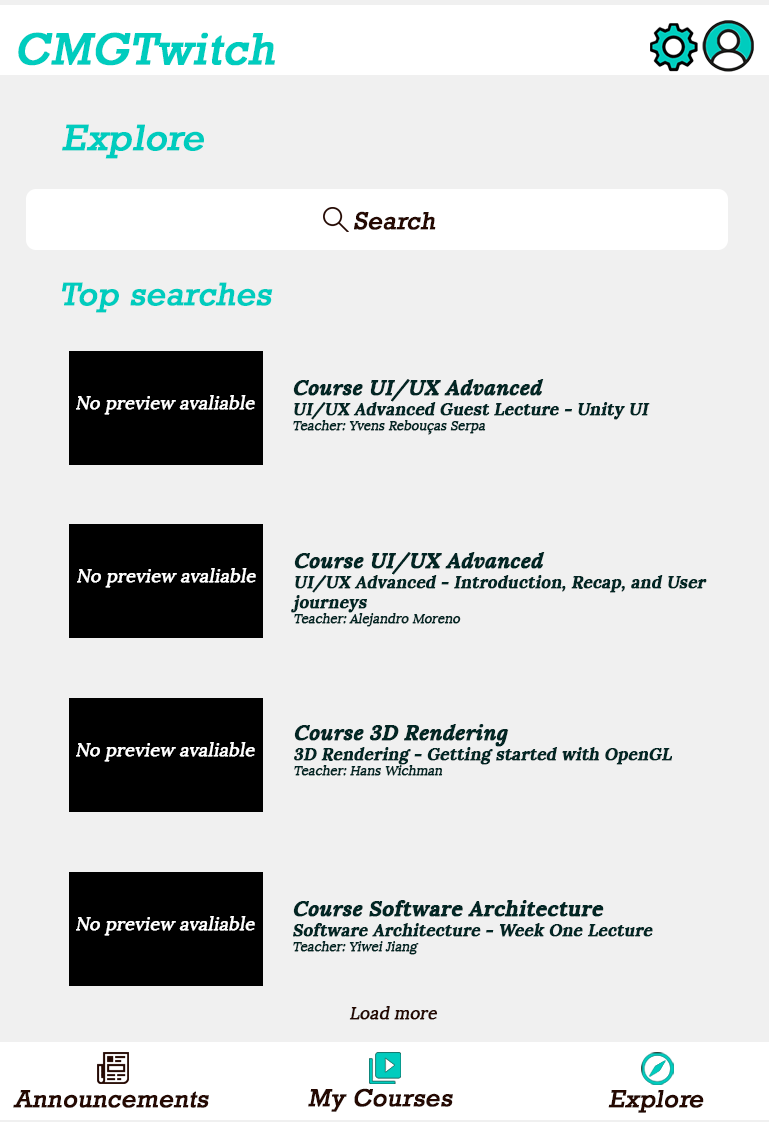
<style>
.page{position:relative;width:769px;height:1122px;background:#f0f0f0}
.page>*{position:absolute;margin:0}
.t1{font:45.4px "Rockwell";color:#00ccbe;font-weight:bold;font-style:italic}
.t2{font:37.5px "Rockwell";color:#00ccbe;font-weight:bold;font-style:italic}
.t3{font:25px "Rockwell";color:#250902;font-weight:bold;font-style:italic}
.t4{font:33.3px "Rockwell";color:#00ccbe;font-weight:bold;font-style:italic}
.t5{font:16.7px "Lora-Bold";color:#022624;font-weight:bold;font-style:italic}
.t6{font:20.8px "Lora-BoldItalic";color:#022624;font-weight:bold;font-style:italic}
.t7{font:12.5px "Lora-Regular";color:#022624;font-weight:bold;font-style:italic}
.t8{font:17.7px "Lora-Regular";color:#ffffff;font-weight:bold;font-style:italic}
.t9{font:20.8px "Lora-Bold";color:#022624;font-weight:bold;font-style:italic}
.t10{font:16.7px "Lora-Regular";color:#250902;font-weight:bold;font-style:italic}
</style>
<div class="page">
<p class="t1" style="left:18px;top:32px;width:257px;height:34px">CMGTwitch</p>
<p class="t2" style="left:62px;top:124px;width:142px;height:35px">Explore</p>
<p class="t3" style="left:354px;top:211px;width:82px;height:19px">Search</p>
<p class="t4" style="left:62px;top:282px;width:211px;height:31px">Top searches</p>
<p class="t5" style="left:293px;top:379px;width:357px;height:56px"><span class="t6">Course UI/UX Advanced<br></span>UI/UX Advanced Guest Lecture - Unity UI<br><span class="t7">Teacher: Yvens Rebouças Serpa</span></p>
<p class="t8" style="left:76px;top:395px;width:179px;height:20px">No preview avaliable</p>
<p class="t8" style="left:76px;top:395px;width:179px;height:20px">No preview avaliable</p>
<p class="t5" style="left:291px;top:552px;width:416px;height:75px"><span class="t6">Course UI/UX Advanced<br></span>UI/UX Advanced - Introduction, Recap, and User journeys<br><span class="t7">Teacher: Alejandro Moreno</span></p>
<p class="t8" style="left:77px;top:568px;width:179px;height:20px">No preview avaliable</p>
<p class="t8" style="left:77px;top:568px;width:179px;height:20px">No preview avaliable</p>
<p class="t5" style="left:294px;top:724px;width:378px;height:52px"><span class="t6">Course 3D Rendering<br></span>3D Rendering - Getting started with OpenGL<br><span class="t7">Teacher: Hans Wichman</span></p>
<p class="t8" style="left:76px;top:742px;width:179px;height:20px">No preview avaliable</p>
<p class="t8" style="left:76px;top:742px;width:179px;height:20px">No preview avaliable</p>
<p class="t5" style="left:293px;top:900px;width:360px;height:55px"><span class="t6">Course </span><span class="t9">Software Architecture<br></span>Software Architecture - Week One Lecture<br><span class="t7">Teacher: Yiwei Jiang</span></p>
<p class="t8" style="left:76px;top:916px;width:179px;height:20px">No preview avaliable</p>
<p class="t8" style="left:76px;top:916px;width:179px;height:20px">No preview avaliable</p>
<p class="t10" style="left:349px;top:1006px;width:89px;height:14px">Load more</p>
<p class="t3" style="left:13px;top:1090px;width:196px;height:18px">Announcements</p>
<p class="t3" style="left:308px;top:1088px;width:145px;height:24px">My Courses</p>
<p class="t3" style="left:608px;top:1090px;width:96px;height:23px">Explore</p>
</div>
